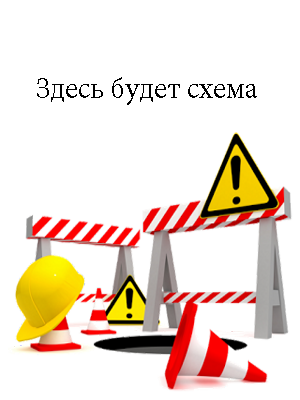
<style>
.page{position:relative;width:300px;height:400px;background:#ffffff}
.page>*{position:absolute;margin:0}
.t1{font:30px "MinionPro-Regular";color:#000000}
</style>
<div class="page">
<p class="t1" style="left:37px;top:77px;width:220px;height:28px">Здесь будет схема</p>
</div>
